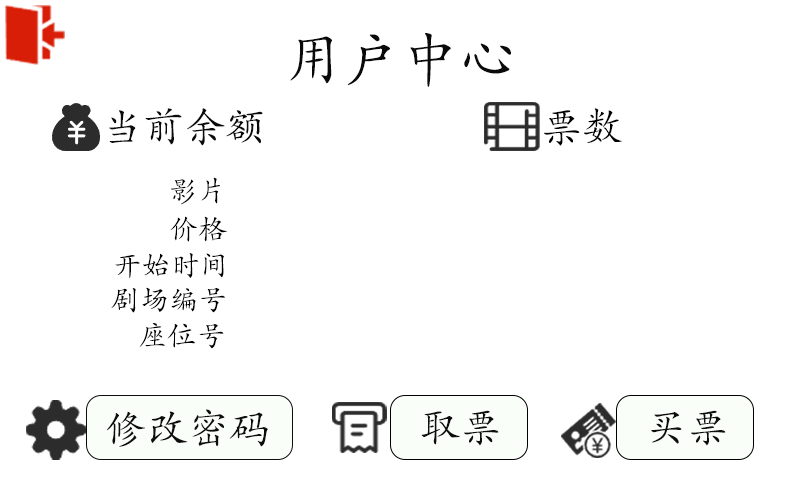
<style>
.page{position:relative;width:800px;height:480px;background:#ffffff}
.page>*{position:absolute;margin:0}
.t1{font:58.3px "STKaiti";color:#0a0a0a}
.t2{font:41.7px "STKaiti";color:#0a0a0a}
.t3{font:41.7px "STKaiti";color:#000000}
.t4{font:29.2px "STKaiti";color:#000000}
.t5{font:41.7px "STKaiti";color:#0d0d0d}
.t6{font:40.4px "STKaiti";color:#0d0d0d}
</style>
<div class="page">
<p class="t1" style="left:290px;top:33px;width:221px;height:54px">用户中心</p>
<p class="t2" style="left:109px;top:108px;width:154px;height:38px">当前余额</p>
<p class="t3" style="left:544px;top:108px;width:78px;height:38px">票数</p>
<p class="t4" style="left:171px;top:177px;width:49px;height:28px">影片</p>
<p class="t4" style="left:170px;top:216px;width:57px;height:26px">价格</p>
<p class="t4" style="left:115px;top:253px;width:109px;height:25px">开始时间</p>
<p class="t4" style="left:111px;top:287px;width:114px;height:26px">剧场编号</p>
<p class="t4" style="left:139px;top:323px;width:85px;height:26px">座位号</p>
<p class="t5" style="left:106px;top:409px;width:162px;height:38px">修改密码</p>
<p class="t6" style="left:421px;top:410px;width:78px;height:36px">取票</p>
<p class="t6" style="left:651px;top:410px;width:75px;height:36px">买票</p>
</div>
